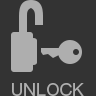
<style>
.page{position:relative;width:96px;height:96px;background:#333333}
.page>*{position:absolute;margin:0}
.t1{font:18px "HelveticaNeueLTStd-Roman";color:#aeaeae;text-transform:uppercase}
</style>
<div class="page">
<p class="t1" style="left:12px;top:83px;width:72px;height:13px">UNLOCK</p>
</div>
